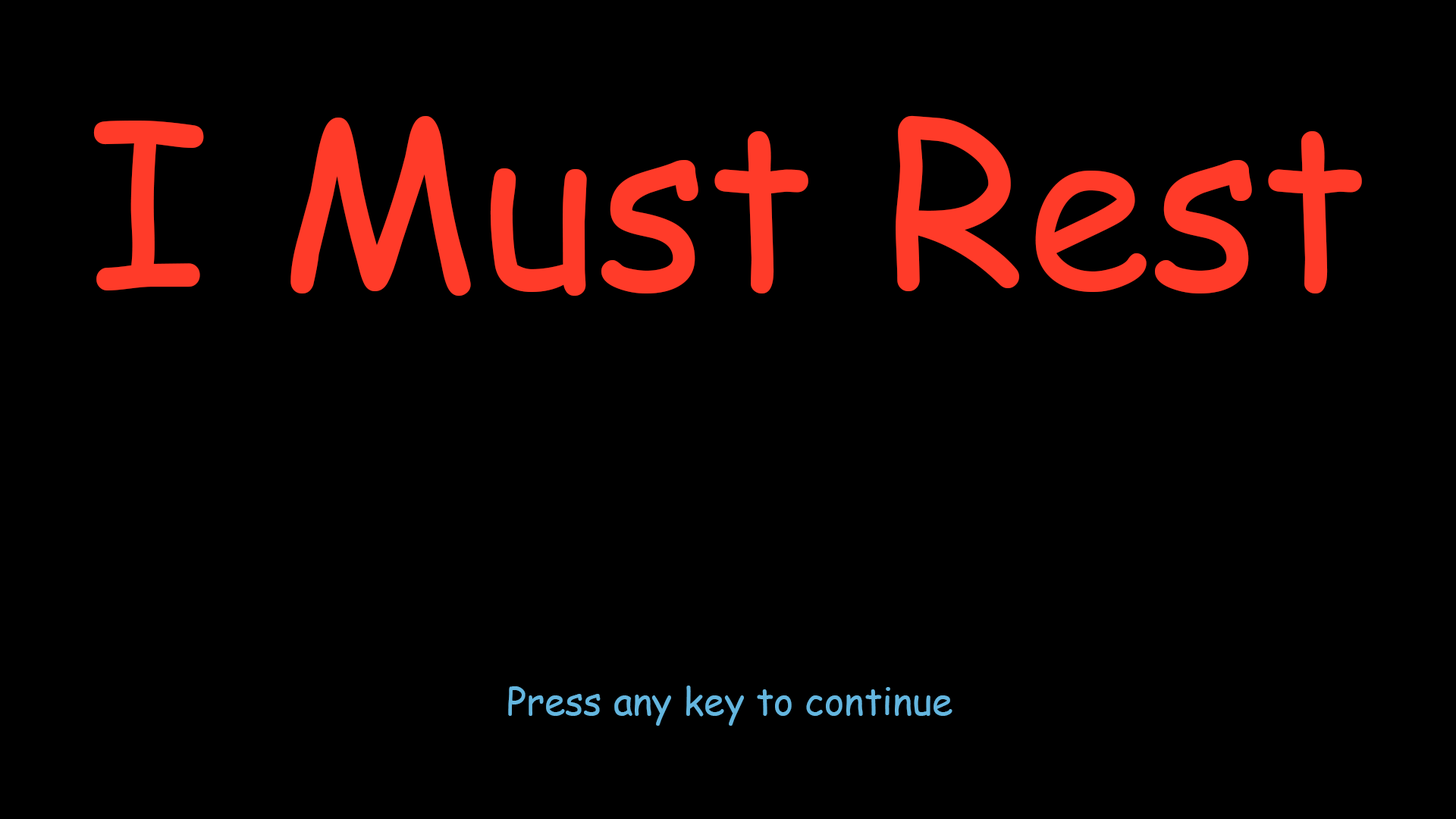
<style>
.page{position:relative;width:1456px;height:819px;background:#000000}
.page>*{position:absolute;margin:0}
.t1{font:227.5px "ComicSansMS";color:#ff3b29}
.t2{font:37.9px "ComicSansMS";color:#64b6df}
</style>
<div class="page">
<p class="t1" style="left:93px;top:115px;width:1269px;height:181px">I Must Rest</p>
<p class="t2" style="left:508px;top:686px;width:444px;height:40px">Press any key to continue</p>
</div>
